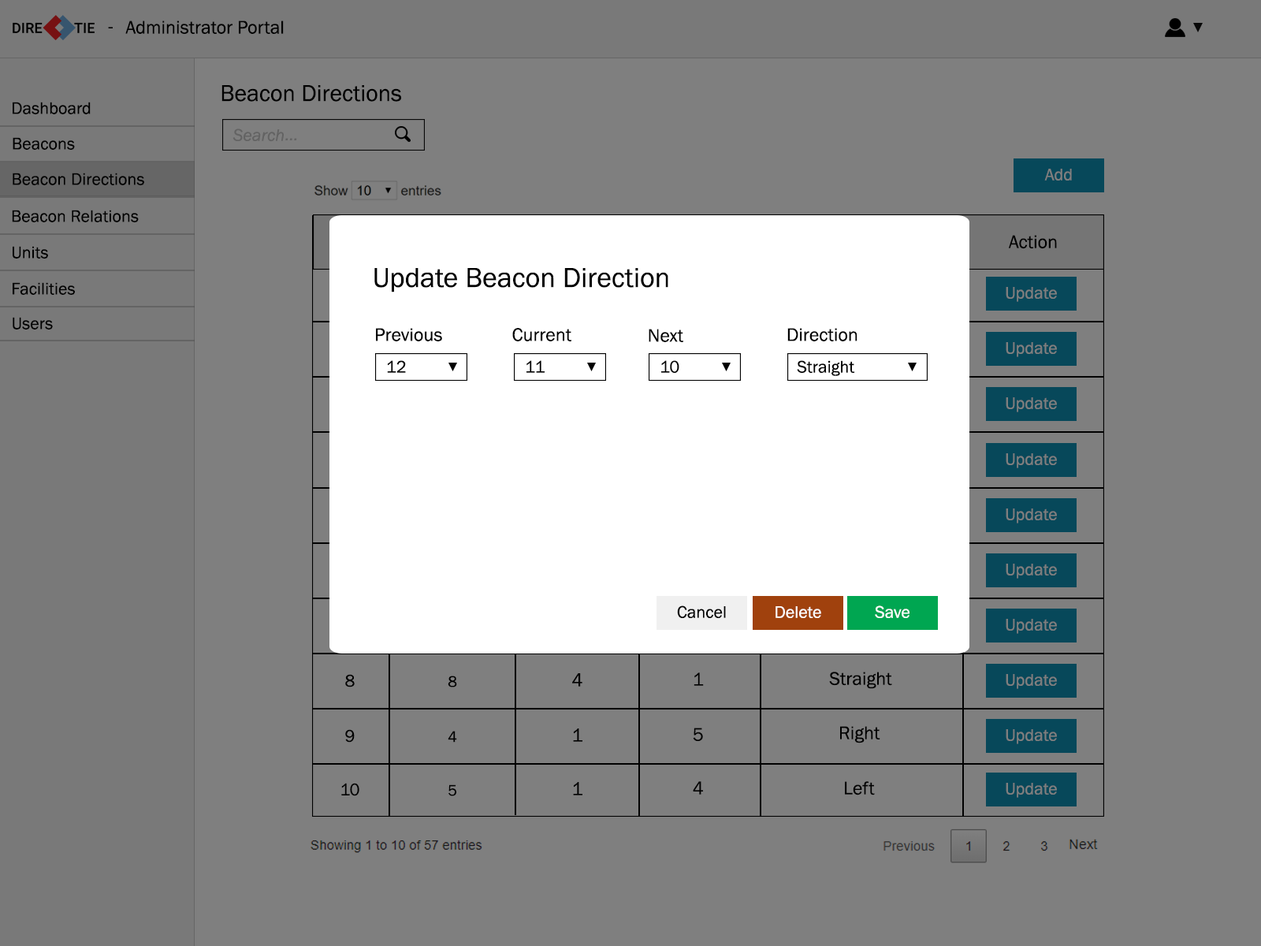
<style>
.page{position:relative;width:1261px;height:946px;background:#7f7f7f}
.page>*{position:absolute;margin:0}
.t1{font:18.9px "FranklinGothic-Book";color:#000000}
.t2{font:23.6px "FranklinGothic-Book";color:#000000}
.t3{font:17.3px "FranklinGothic-Book";color:#000000}
.t4{font:17.3px "FranklinGothic-Book";color:#7f7f7f}
.t5{font:28.4px "FranklinGothic-Book";color:#000000}
.t6{font:18.9px "FranklinGothic-Book"}
.t7{font:17.3px "FranklinGothic-Book";color:#010101}
.t8{font:17.3px "FranklinGothic-Book";color:#fefefe}
.t9{font:15.8px "FranklinGothic-Book";color:#000000}
</style>
<div class="page">
<p class="t1" style="left:108px;top:27px;width:5px;height:1px">-</p>
<p class="t1" style="left:125px;top:20px;width:159px;height:14px">Administrator Portal</p>
<p class="t2" style="left:221px;top:85px;width:180px;height:17px">Beacon Directions</p>
<p class="t3" style="left:13px;top:102px;width:78px;height:12px">Dashboard</p>
<p class="t3" style="left:13px;top:137px;width:62px;height:13px">Beacons</p>
<p class="t3" style="left:13px;top:173px;width:131px;height:12px">Beacon Directions</p>
<p class="t4" style="left:1044px;top:169px;width:28px;height:11px">Add</p>
<p class="t3" style="left:12px;top:210px;width:127px;height:12px">Beacon Relations</p>
<p class="t3" style="left:13px;top:246px;width:35px;height:12px">Units</p>
<p class="t1" style="left:1008px;top:235px;width:49px;height:14px">Action</p>
<p class="t5" style="left:374px;top:268px;width:294px;height:24px">Update Beacon Direction</p>
<p class="t3" style="left:13px;top:282px;width:62px;height:13px">Facilities</p>
<p class="t4" style="left:1006px;top:287px;width:51px;height:15px">Update</p>
<p class="t3" style="left:13px;top:317px;width:40px;height:12px">Users</p>
<p class="t1" style="left:376px;top:328px;width:66px;height:13px">Previous</p>
<p class="t1" style="left:512px;top:328px;width:59px;height:13px">Current</p>
<p class="t1" style="left:649px;top:329px;width:34px;height:13px">Next</p>
<p class="t1" style="left:787px;top:328px;width:70px;height:13px">Direction</p>
<p class="t6" style="left:573px;top:341px;width:9px;height:14px">1</p>
<p class="t4" style="left:1006px;top:342px;width:51px;height:15px">Update</p>
<p class="t3" style="left:387px;top:360px;width:19px;height:13px">12</p>
<p class="t3" style="left:526px;top:360px;width:19px;height:13px">11</p>
<p class="t3" style="left:661px;top:360px;width:18px;height:13px">10</p>
<p class="t3" style="left:797px;top:360px;width:57px;height:16px">Straight</p>
<p class="t4" style="left:1006px;top:397px;width:51px;height:15px">Update</p>
<p class="t4" style="left:1006px;top:453px;width:51px;height:15px">Update</p>
<p class="t4" style="left:1006px;top:508px;width:51px;height:15px">Update</p>
<p class="t4" style="left:1006px;top:563px;width:51px;height:15px">Update</p>
<p class="t7" style="left:677px;top:605px;width:49px;height:13px">Cancel</p>
<p class="t8" style="left:875px;top:605px;width:34px;height:13px">Save</p>
<p class="t8" style="left:775px;top:606px;width:46px;height:12px">Delete</p>
<p class="t4" style="left:1006px;top:619px;width:51px;height:15px">Update</p>
<p class="t3" style="left:345px;top:674px;width:10px;height:13px">8</p>
<p class="t9" style="left:448px;top:675px;width:9px;height:12px">8</p>
<p class="t1" style="left:572px;top:673px;width:10px;height:13px">4</p>
<p class="t1" style="left:694px;top:672px;width:10px;height:14px">1</p>
<p class="t1" style="left:829px;top:671px;width:63px;height:18px">Straight</p>
<p class="t4" style="left:1006px;top:674px;width:51px;height:15px">Update</p>
<p class="t1" style="left:840px;top:726px;width:40px;height:17px">Right</p>
<p class="t3" style="left:345px;top:729px;width:10px;height:13px">9</p>
<p class="t9" style="left:448px;top:731px;width:9px;height:11px">4</p>
<p class="t1" style="left:573px;top:728px;width:9px;height:14px">1</p>
<p class="t1" style="left:693px;top:727px;width:10px;height:14px">5</p>
<p class="t4" style="left:1006px;top:729px;width:51px;height:15px">Update</p>
<p class="t3" style="left:341px;top:783px;width:18px;height:13px">10</p>
<p class="t9" style="left:448px;top:784px;width:8px;height:12px">5</p>
<p class="t1" style="left:573px;top:782px;width:9px;height:13px">1</p>
<p class="t1" style="left:693px;top:781px;width:10px;height:13px">4</p>
<p class="t1" style="left:845px;top:781px;width:30px;height:14px">Left</p>
<p class="t4" style="left:1006px;top:783px;width:51px;height:15px">Update</p>
</div>
